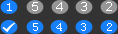
<style>
.page{position:relative;width:118px;height:34px;background:#333333}
.page>*{position:absolute;margin:0}
.t1{font:12px "SimSun";letter-spacing:0.019em;color:#ffffff;scale:1.2 1}
.t2{font:12px "ArialMT";letter-spacing:0.019em;color:#ffffff;scale:1.2 1}
</style>
<div class="page">
<p class="t1" style="left:7px;top:3px;width:5px;height:8px">1</p>
<p class="t2" style="left:32px;top:2px;width:6px;height:9px">5</p>
<p class="t2" style="left:56px;top:2px;width:7px;height:9px">4</p>
<p class="t2" style="left:81px;top:2px;width:6px;height:9px">3</p>
<p class="t2" style="left:106px;top:2px;width:6px;height:9px">2</p>
<p class="t1" style="left:33px;top:23px;width:5px;height:8px">5</p>
<p class="t1" style="left:56px;top:23px;width:6px;height:8px">4</p>
<p class="t1" style="left:81px;top:23px;width:5px;height:8px">3</p>
<p class="t1" style="left:107px;top:23px;width:5px;height:8px">2</p>
</div>
